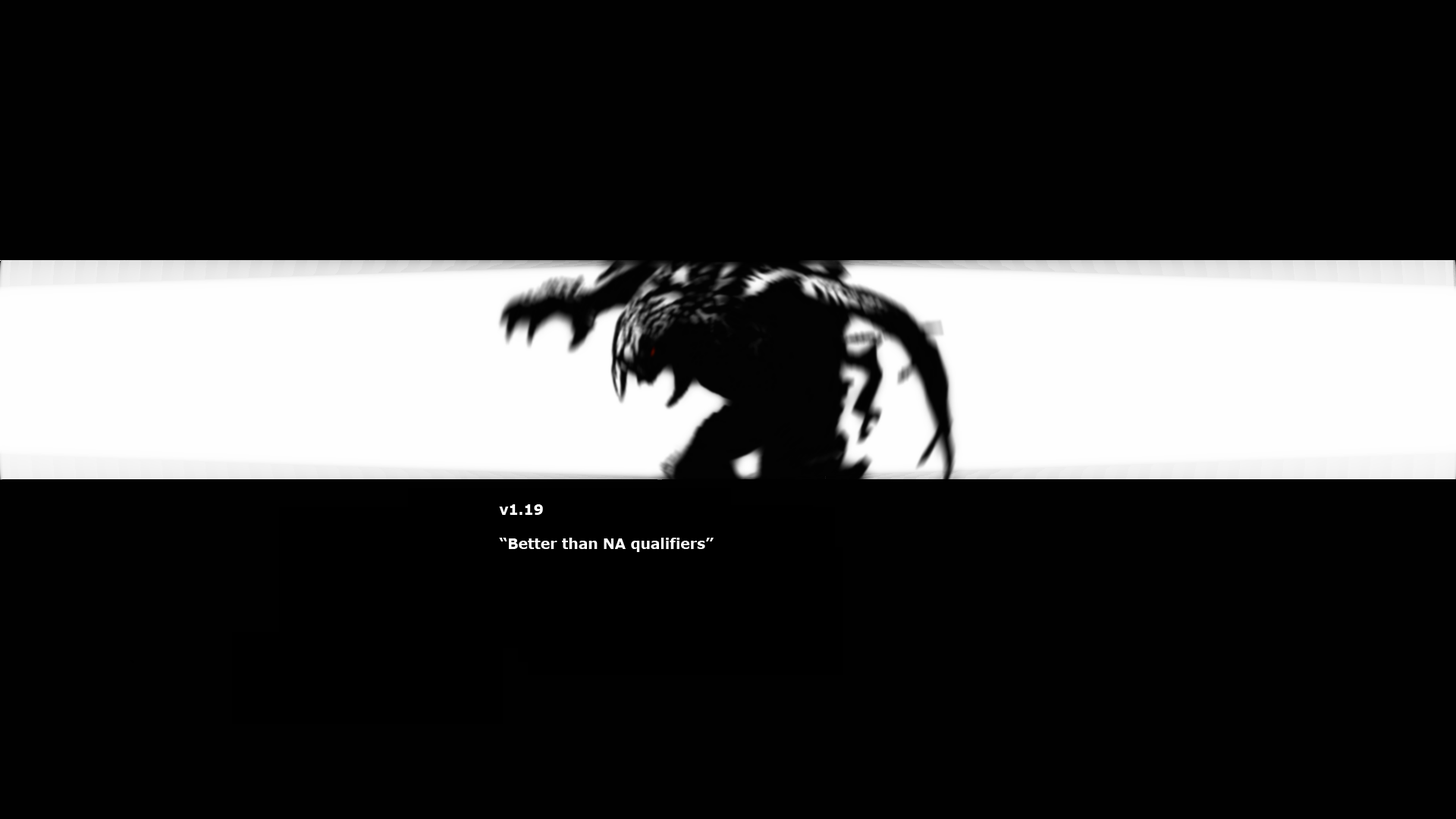
<style>
.page{position:relative;width:1456px;height:819px;background:#010101}
.page>*{position:absolute;margin:0}
.t1{font:14.2px "Verdana-Bold";color:#ffffff}
</style>
<div class="page">
<p class="t1" style="left:499px;top:504px;width:215px;height:48px">v1.19<br><br>“Better than NA qualifiers”</p>
</div>
